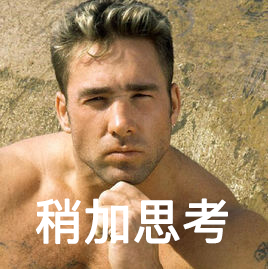
<style>
.page{position:relative;width:268px;height:269px}
.page>*{position:absolute;margin:0}
.t1{font:48px "PingFangSC-Regular";color:#ffffff;font-weight:bold}
</style>
<div class="page">
<p class="t1" style="left:35px;top:198px;width:193px;height:47px">稍加思考</p>
</div>
